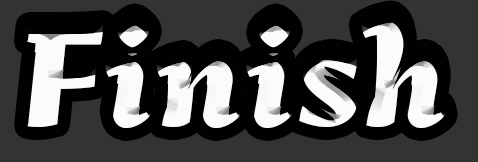
<style>
.page{position:relative;width:478px;height:162px;background:#333333}
.page>*{position:absolute;margin:0}
.t1{font:150px "ArekLatn-EbIt";letter-spacing:0.025em;color:#ffffff}
</style>
<div class="page">
<p class="t1" style="left:26px;top:13px;width:419px;height:115px">Finish</p>
</div>
